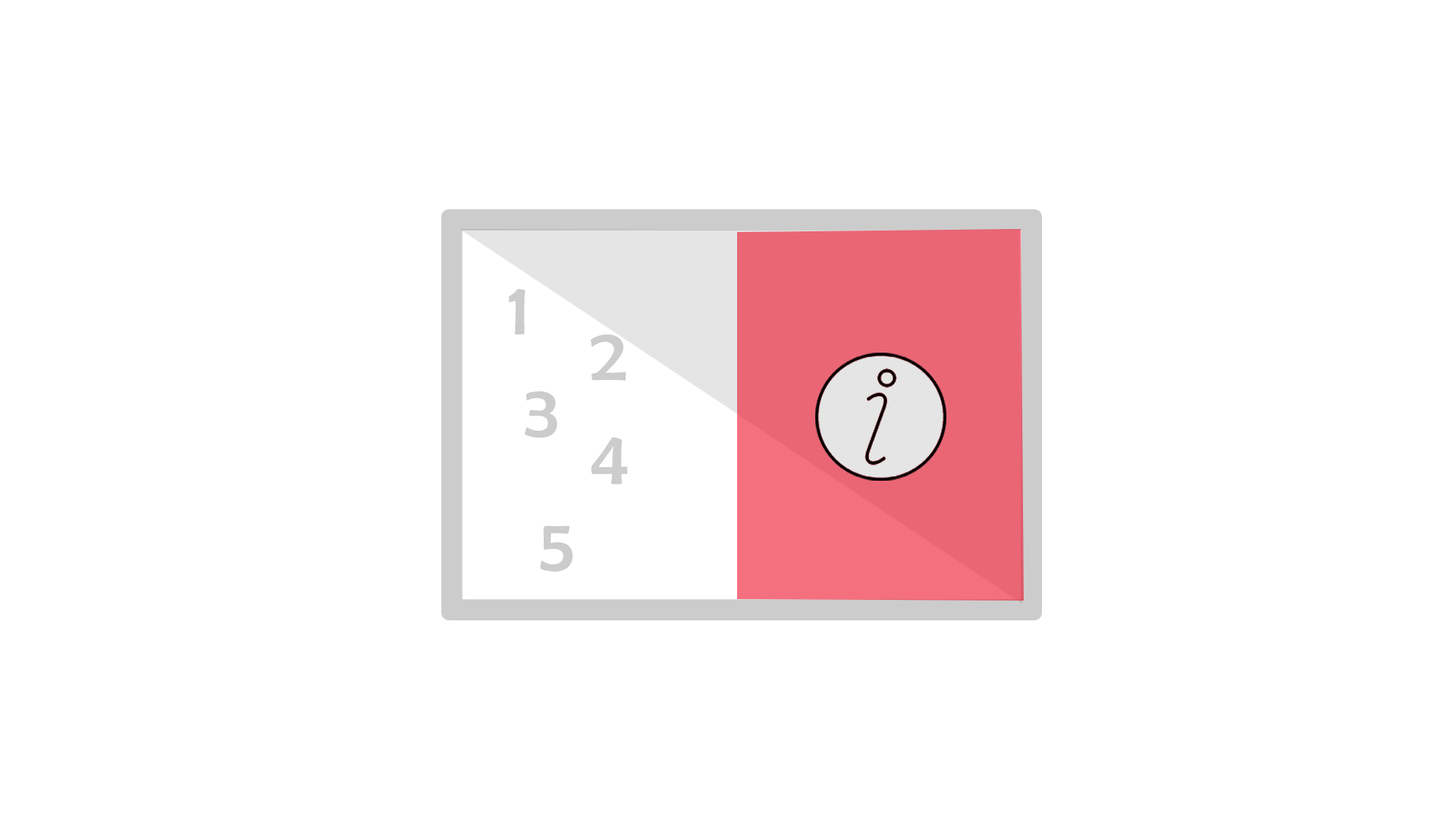
<style>
.page{position:relative;width:1456px;height:819px;background:#ffffff}
.page>*{position:absolute;margin:0}
.t1{font:75.8px "BerlinSansFB-Reg";color:#cccccc}
</style>
<div class="page">
<p class="t1" style="left:509px;top:288px;width:17px;height:46px">1</p>
<p class="t1" style="left:590px;top:334px;width:36px;height:47px">2</p>
<p class="t1" style="left:524px;top:391px;width:33px;height:47px">3</p>
<p class="t1" style="left:591px;top:437px;width:37px;height:48px">4</p>
<p class="t1" style="left:540px;top:526px;width:33px;height:46px">5</p>
</div>
